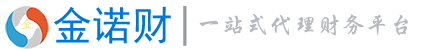
<style>
.page{position:relative;width:443px;height:50px;background:#ffffff}
.page>*{position:absolute;margin:0}
.t1{font:40px "SimHei";color:#0078d7}
.t2{font:40px "SimHei";color:#989c9e}
.t3{font:24px "STXingkai";color:#b6babe}
.t4{font:12.5px "STKaiti";color:#f0e68c}
</style>
<div class="page">
<p class="t1" style="left:53px;top:6px;width:118px;height:38px">金诺财</p>
<p class="t2" style="left:183px;top:6px;width:4px;height:40px">|</p>
<p class="t3" style="left:199px;top:14px;width:209px;height:22px">一站式代理财务平台</p>
<p class="t4" style="left:21px;top:19px;width:12px;height:10px">金</p>
</div>
